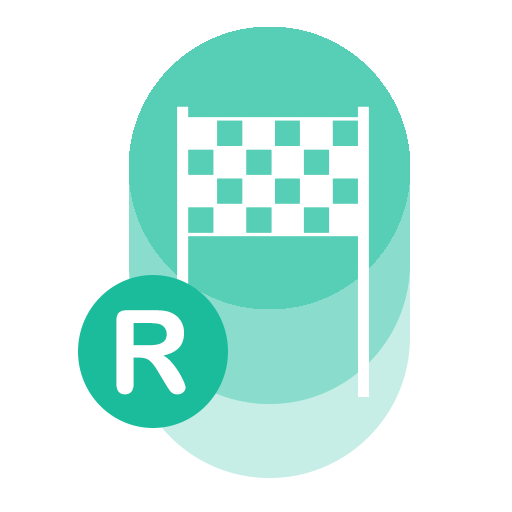
<style>
.page{position:relative;width:512px;height:512px;background:#ffffff}
.page>*{position:absolute;margin:0}
.t1{font:115px "ArialRoundedMTBold";color:#ffffff}
</style>
<div class="page">
<p class="t1" style="left:116px;top:310px;width:70px;height:85px">R</p>
</div>
